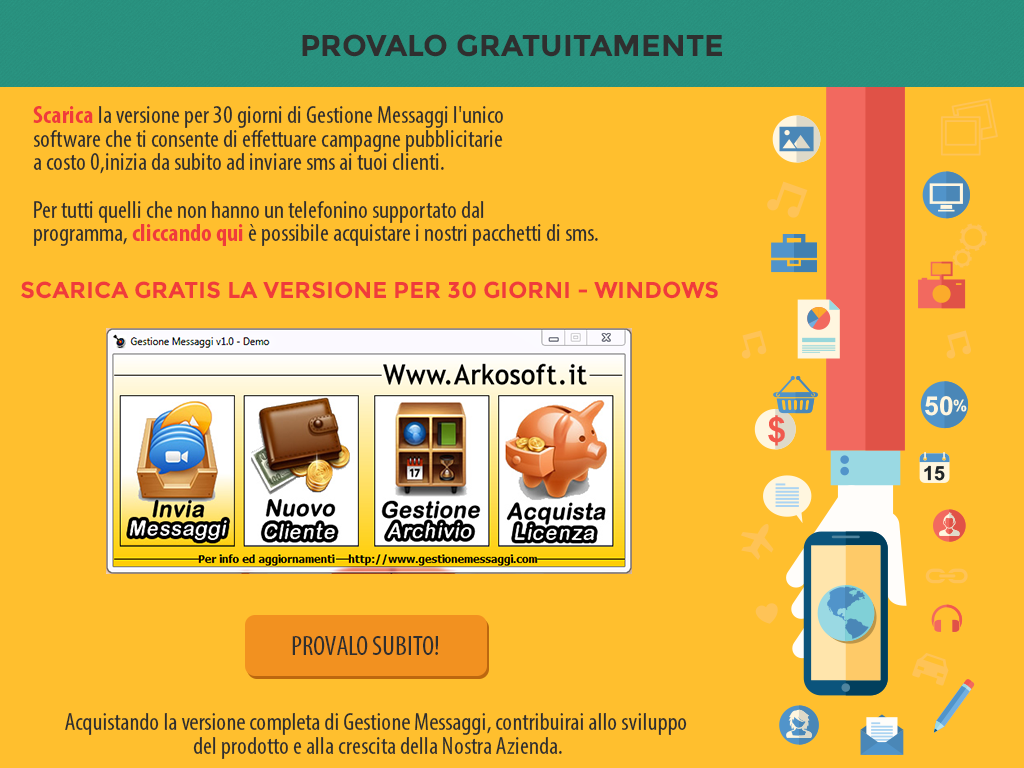
<style>
.page{position:relative;width:1024px;height:768px;background:#ffbf2e}
.page>*{position:absolute;margin:0}
.t1{font:30px "Montserrat-Bold";color:#2f2f2f}
.t2{font:25px/23.7px "MyriadPro-Cond";color:#2f2f2f}
.t3{font:25px/23.7px "MyriadPro-BoldCond";color:#f03b3b}
.t4{font:23px "Montserrat-Bold";color:#f03b3b}
.t5{font:28px "MyriadPro-Cond";color:#2f2f2f}
</style>
<div class="page">
<p class="t1" style="left:302px;top:34px;width:420px;height:23px">PROVALO GRATUITAMENTE</p>
<p class="t2" style="left:33px;top:106px;width:565px;height:140px"><span class="t3">Scarica</span> la versione per 30 giorni di Gestione Messaggi l'unico<br>software che ti consente di effettuare campagne pubblicitarie<br>a costo 0,inizia da subito ad inviare sms ai tuoi clienti.<br><br>Per tutti quelli che non hanno un telefonino supportato dal<br>programma, <span class="t3">cliccando qui </span>è possibile acquistare i nostri pacchetti di sms.</p>
<p class="t4" style="left:21px;top:281px;width:697px;height:18px">SCARICA GRATIS LA VERSIONE PER 30 GIORNI - WINDOWS</p>
<p class="t5" style="left:292px;top:636px;width:146px;height:19px">PROVALO SUBITO!</p>
<p class="t2" style="left:65px;top:713px;width:622px;height:46px;text-align:center">Acquistando la versione completa di Gestione Messaggi, contribuirai allo sviluppo<br> del prodotto e alla crescita della Nostra Azienda.</p>
</div>
